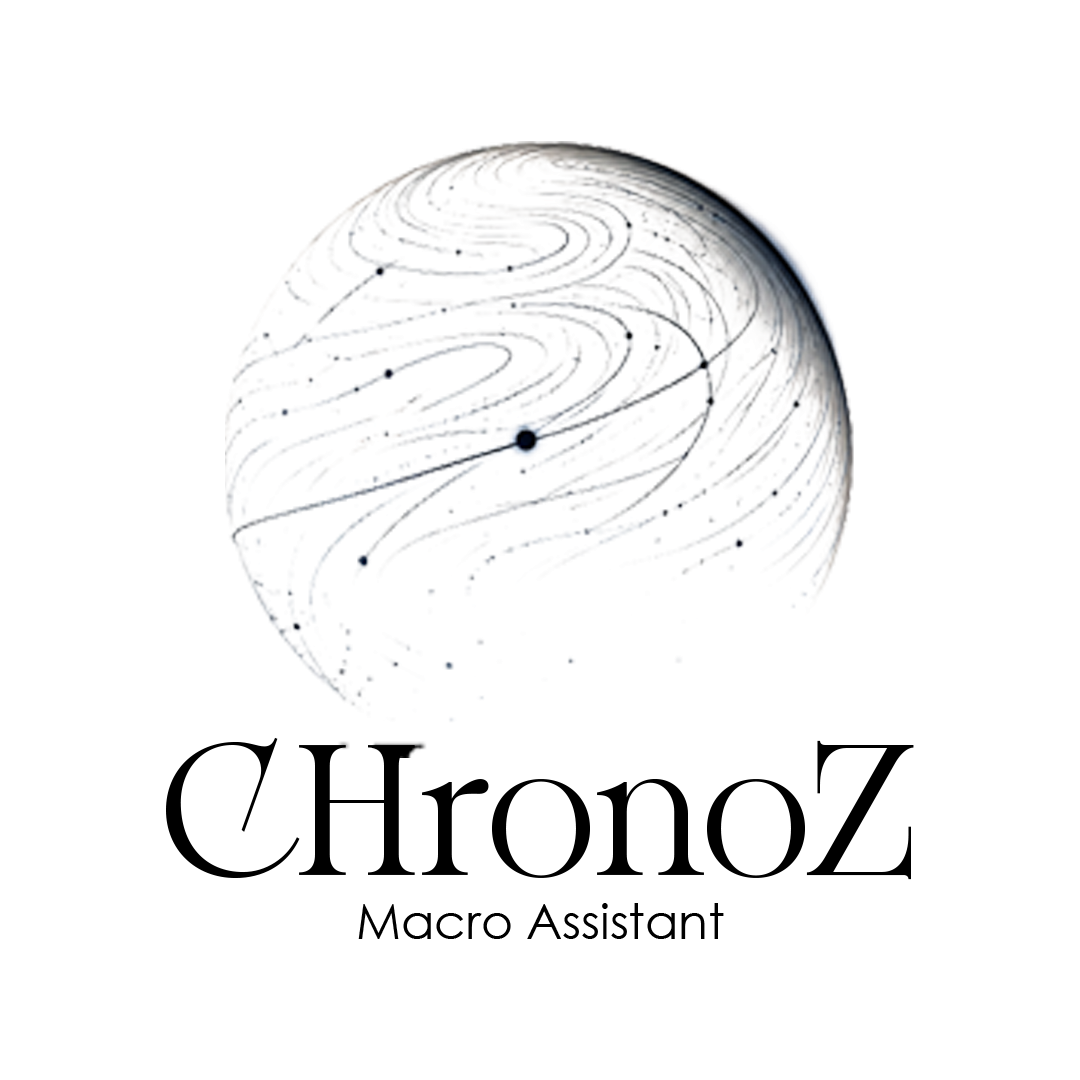
<style>
.page{position:relative;width:1080px;height:1080px;background:#ffffff}
.page>*{position:absolute;margin:0}
.t1{font:185.4px "SilverMagnum-Regular";color:#000000}
.t2{font:48.7px "CenturyGothic";color:#000000}
</style>
<div class="page">
<p class="t1" style="left:166px;top:737px;width:748px;height:143px">CHronoZ</p>
<p class="t2" style="left:358px;top:903px;width:366px;height:36px">Macro Assistant</p>
</div>
